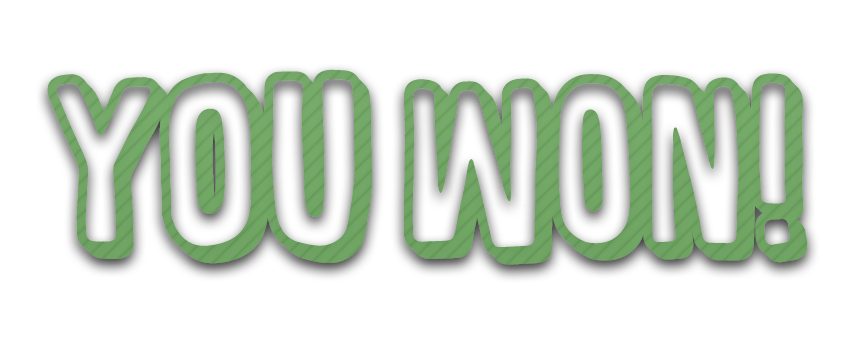
<style>
.page{position:relative;width:856px;height:341px;background:#ffffff}
.page>*{position:absolute;margin:0}
.t1{font:177px "SugarpunchDEMO";color:#70a564}
</style>
<div class="page">
<p class="t1" style="left:47px;top:69px;width:761px;height:196px">YOU won!</p>
</div>
